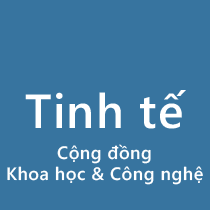
<style>
.page{position:relative;width:210px;height:210px;background:#37749f}
.page>*{position:absolute;margin:0}
.t1{font:48px "SegoeWP-Semibold";letter-spacing:0.025em;color:#ffffff}
.t2{font:18px "SegoeWP-Semibold";letter-spacing:0.025em;color:#fefefe}
.t3{font:18px "SegoeWP-Semibold";letter-spacing:0.025em;color:#ffffff}
</style>
<div class="page">
<p class="t1" style="left:25px;top:90px;width:161px;height:39px">Tinh tế</p>
<p class="t2" style="left:57px;top:144px;width:94px;height:20px">Cộng đồng</p>
<p class="t3" style="left:7px;top:166px;width:196px;height:19px">Khoa học &amp; Công nghệ</p>
</div>
